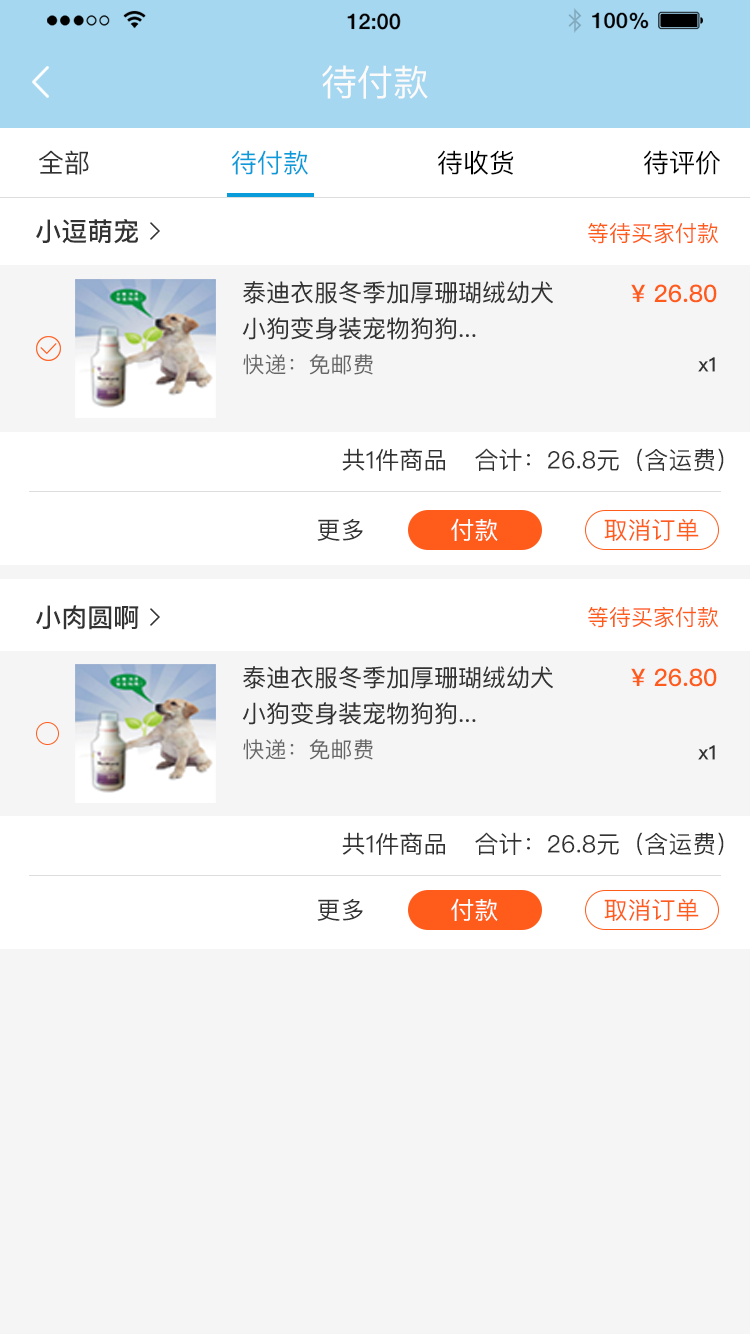
<style>
.page{position:relative;width:750px;height:1334px;background:#f5f5f5}
.page>*{position:absolute;margin:0}
.t1{font:36px "PingFangSC-Regular";color:#fdfafa}
.t2{font:26px "PingFangSC-Regular";color:#333333}
.t3{font:26px "PingFangSC-Regular";color:#0a9cda}
.t4{font:26px "PingFangSC-Regular";color:#000000}
.t5{font:26px "PingFangSC-Medium";color:#333333}
.t6{font:22px "PingFangSC-Regular";color:#ff5c1c}
.t7{font:24px/36px "PingFangSC";color:#333333}
.t8{font:24px "PingFangSC-Medium";color:#ff5c1c}
.t9{font:22px "PingFangSC-Regular";color:#666666}
.t10{font:20px "PingFangSC-Medium";color:#333333}
.t11{font:24px "PingFangSC-Regular";color:#333333}
.t12{font:24px "PingFangSC-Regular";color:#ffffff}
.t13{font:24px "PingFangSC-Regular";color:#ff5c1c}
</style>
<div class="page">
<p class="t1" style="left:322px;top:65px;width:106px;height:34px">待付款</p>
<p class="t2" style="left:39px;top:150px;width:50px;height:25px">全部</p>
<p class="t3" style="left:232px;top:150px;width:76px;height:25px">待付款</p>
<p class="t4" style="left:438px;top:150px;width:76px;height:25px">待收货</p>
<p class="t4" style="left:644px;top:150px;width:76px;height:25px">待评价</p>
<p class="t5" style="left:36px;top:219px;width:103px;height:25px">小逗萌宠</p>
<p class="t6" style="left:588px;top:222px;width:131px;height:22px">等待买家付款</p>
<p class="t7" style="left:242px;top:281px;width:311px;height:59px">泰迪衣服冬季加厚珊瑚绒幼犬<br>小狗变身装宠物狗狗...</p>
<p class="t8" style="left:631px;top:284px;width:86px;height:19px">¥ 26.80</p>
<p class="t9" style="left:243px;top:354px;width:130px;height:21px">快递：免邮费</p>
<p class="t10" style="left:698px;top:357px;width:17px;height:15px">x1</p>
<p class="t11" style="left:342px;top:448px;width:103px;height:23px">共1件商品</p>
<p class="t11" style="left:475px;top:448px;width:249px;height:23px">合计：26.8元（含运费）</p>
<p class="t11" style="left:317px;top:518px;width:46px;height:23px">更多</p>
<p class="t12" style="left:451px;top:518px;width:47px;height:23px">付款</p>
<p class="t13" style="left:604px;top:518px;width:95px;height:23px">取消订单</p>
<p class="t5" style="left:36px;top:605px;width:103px;height:25px">小肉圆啊</p>
<p class="t6" style="left:588px;top:606px;width:131px;height:22px">等待买家付款</p>
<p class="t7" style="left:242px;top:666px;width:311px;height:59px">泰迪衣服冬季加厚珊瑚绒幼犬<br>小狗变身装宠物狗狗...</p>
<p class="t8" style="left:631px;top:668px;width:86px;height:19px">¥ 26.80</p>
<p class="t9" style="left:243px;top:739px;width:130px;height:21px">快递：免邮费</p>
<p class="t10" style="left:698px;top:745px;width:17px;height:15px">x1</p>
<p class="t11" style="left:342px;top:832px;width:103px;height:23px">共1件商品</p>
<p class="t11" style="left:475px;top:832px;width:249px;height:23px">合计：26.8元（含运费）</p>
<p class="t11" style="left:317px;top:898px;width:46px;height:23px">更多</p>
<p class="t12" style="left:451px;top:898px;width:47px;height:23px">付款</p>
<p class="t13" style="left:604px;top:898px;width:95px;height:23px">取消订单</p>
</div>
